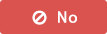
<style>
.page{position:relative;width:107px;height:34px;background:#da534f}
.page>*{position:absolute;margin:0}
.t1{font:16px "HKGrotesk-Medium";color:#ffffff;font-weight:bold}
</style>
<div class="page">
<p class="t1" style="left:58px;top:11px;width:19px;height:12px">No</p>
</div>
